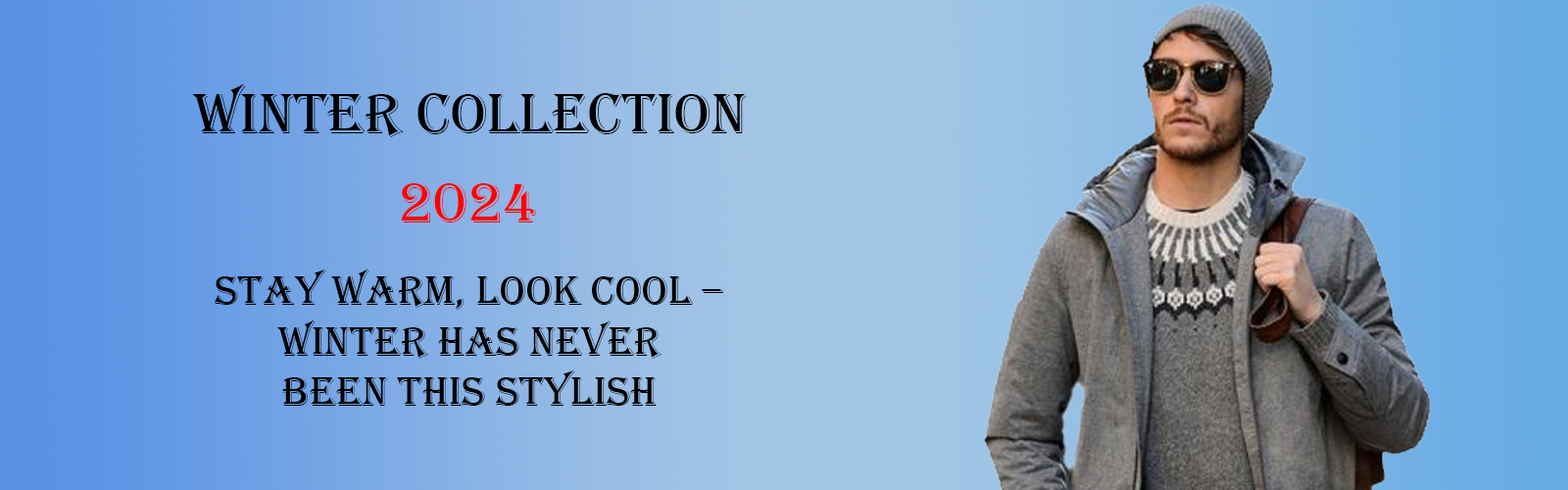
<style>
.page{position:relative;width:1568px;height:490px}
.page>*{position:absolute;margin:0}
.t1{font:58.8px "Algerian";color:#000000}
.t2{font:58.8px "Algerian";color:#ff0000}
.t3{font:42.1px "Algerian";color:#000000}
</style>
<div class="page">
<p class="t1" style="left:192px;top:83px;width:555px;height:54px">Winter Collection</p>
<p class="t2" style="left:401px;top:183px;width:135px;height:39px">2024</p>
<p class="t3" style="left:215px;top:269px;width:508px;height:137px;text-align:center">Stay Warm, Look Cool –<br> Winter Has Never <br>Been This Stylish</p>
</div>
